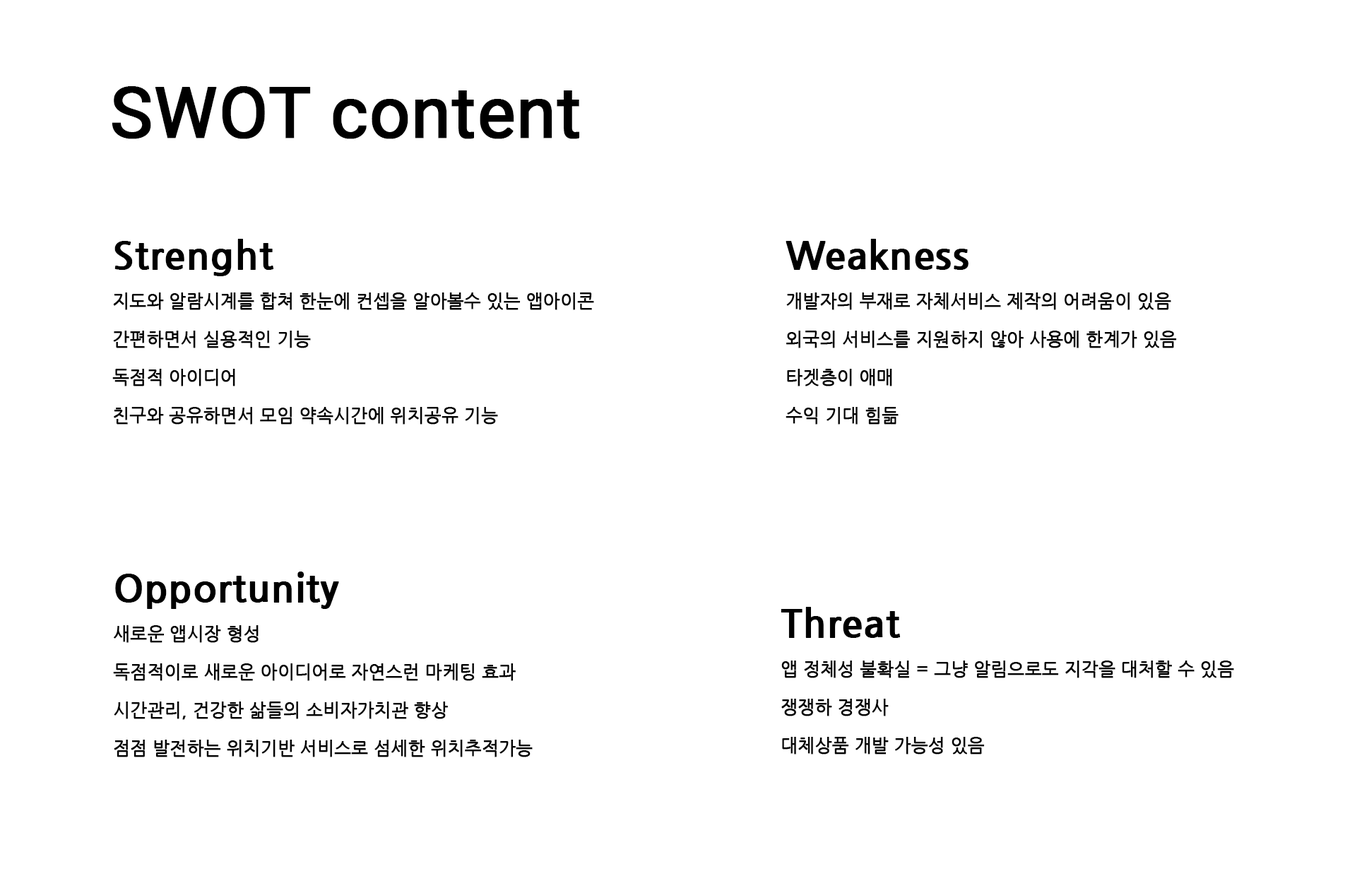
<style>
.page{position:relative;width:1362px;height:876px;background:#ffffff}
.page>*{position:absolute;margin:0}
.t1{font:70.6px "Roboto-Regular";color:#000000;font-weight:bold}
.t2{font:17.7px/38.3px "NanumGothic";color:#000000;font-weight:bold}
.t3{font:38.3px/38.3px "NanumGothicBold";color:#000000;font-weight:bold}
</style>
<div class="page">
<p class="t1" style="left:112px;top:86px;width:467px;height:53px">SWOT content</p>
<p class="t2" style="left:112px;top:239px;width:482px;height:185px"><span class="t3">Strenght<br></span>지도와 알람시계를 합쳐 한눈에 컨셉을 알아볼수 있는 앱아이콘<br>간편하면서 실용적인 기능<br>독점적 아이디어<br>친구와 공유하면서 모임 약속시간에 위치공유 기능</p>
<p class="t2" style="left:785px;top:239px;width:392px;height:185px"><span class="t3">Weakness<br></span>개발자의 부재로 자체서비스 제작의 어려움이 있음<br>외국의 서비스를 지원하지 않아 사용에 한계가 있음<br>타겟층이 애매<br>수익 기대 힘듦</p>
<p class="t2" style="left:113px;top:571px;width:420px;height:186px"><span class="t3">Opportunity<br></span>새로운 앱시장 형성<br>독점적이로 새로운 아이디어로 자연스런 마케팅 효과<br>시간관리, 건강한 삶들의 소비자가치관 향상<br>점점 발전하는 위치기반 서비스로 섬세한 위치추적가능</p>
<p class="t2" style="left:780px;top:607px;width:454px;height:147px"><span class="t3">Threat<br></span>앱 정체성 불확실 = 그냥 알림으로도 지각을 대처할 수 있음<br>쟁쟁하 경쟁사<br>대체상품 개발 가능성 있음</p>
</div>
